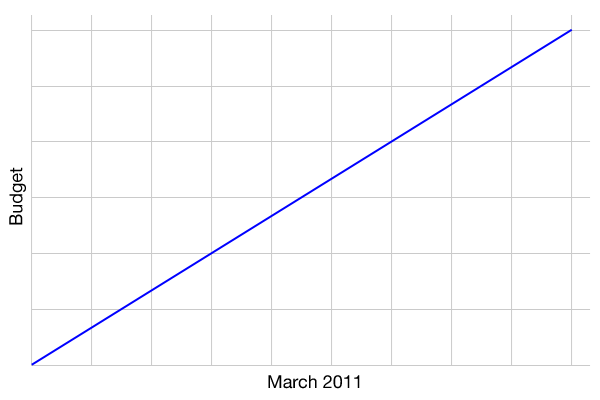
<style>
.page{position:relative;width:600px;height:400px;background:#ffffff}
.page>*{position:absolute;margin:0}
.t1{font:18px "HelveticaNeue";color:#000000}
</style>
<div class="page">
<p class="t1" style="left:9px;top:167px;width:17px;height:58px;rotate:-90deg">Budget</p>
<p class="t1" style="left:268px;top:375px;width:92px;height:14px">March 2011</p>
</div>
